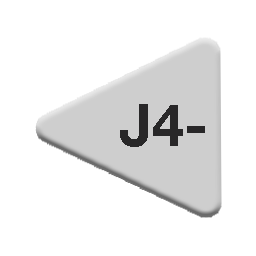
<style>
.page{position:relative;width:256px;height:256px;background:#ffffff}
.page>*{position:absolute;margin:0}
.t1{font:58.6px "HelveticaNeue-Bold";color:#282728}
</style>
<div class="page">
<p class="t1" style="left:120px;top:104px;width:85px;height:43px">J4-</p>
</div>
